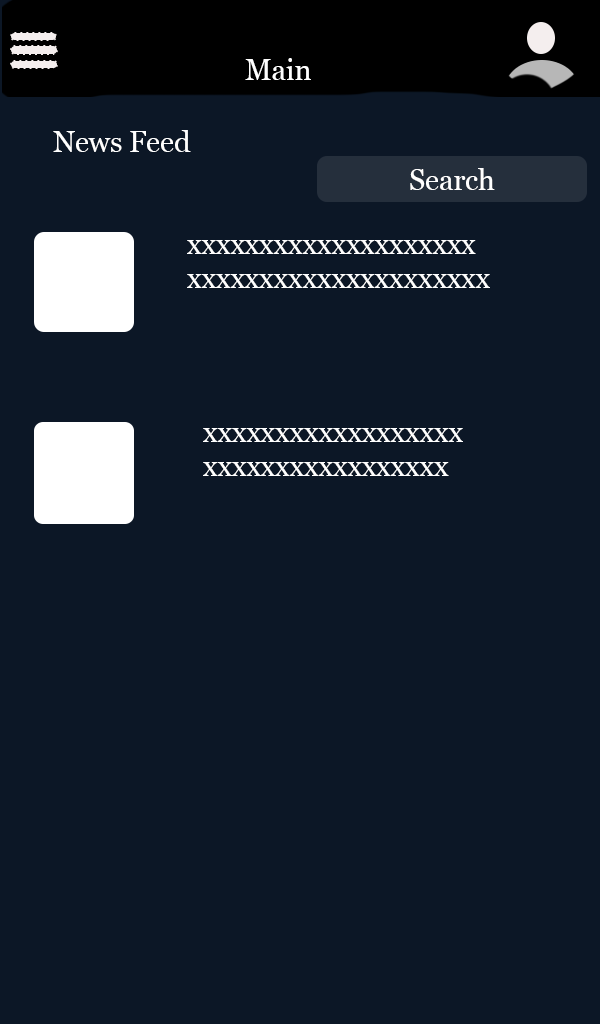
<style>
.page{position:relative;width:600px;height:1024px;background:#0c1726}
.page>*{position:absolute;margin:0}
.t1{font:28.6px "Georgia";color:#ffffff}
</style>
<div class="page">
<p class="t1" style="left:245px;top:58px;width:66px;height:22px">Main</p>
<p class="t1" style="left:53px;top:130px;width:138px;height:22px">News Feed</p>
<p class="t1" style="left:410px;top:168px;width:85px;height:22px">Search</p>
<p class="t1" style="left:187px;top:240px;width:303px;height:48px">xxxxxxxxxxxxxxxxxxxx<br>xxxxxxxxxxxxxxxxxxxxx</p>
<p class="t1" style="left:203px;top:428px;width:260px;height:48px">xxxxxxxxxxxxxxxxxx<br>xxxxxxxxxxxxxxxxx</p>
</div>
